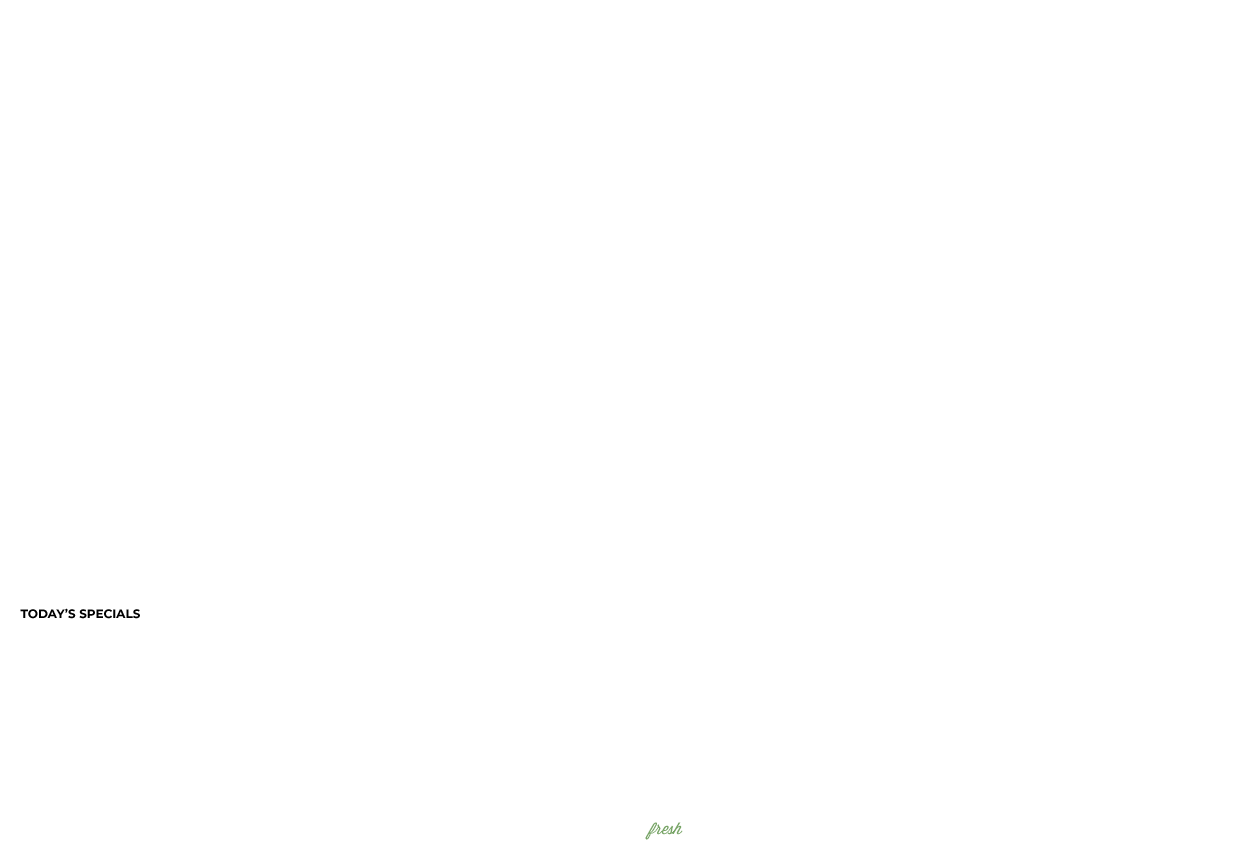
<style>
.page{position:relative;width:1240px;height:868px;background:#ffffff}
.page>*{position:absolute;margin:0}
.t1{font:12px "Montserrat-Bold";color:#000000;text-transform:uppercase}
.t2{font:16px "Wisdom-Script";color:#77a466}
</style>
<div class="page">
<p class="t1" style="left:20px;top:608px;width:120px;height:11px">Today’s Specials</p>
<p class="t2" style="left:645px;top:822px;width:38px;height:18px">fresh</p>
</div>
